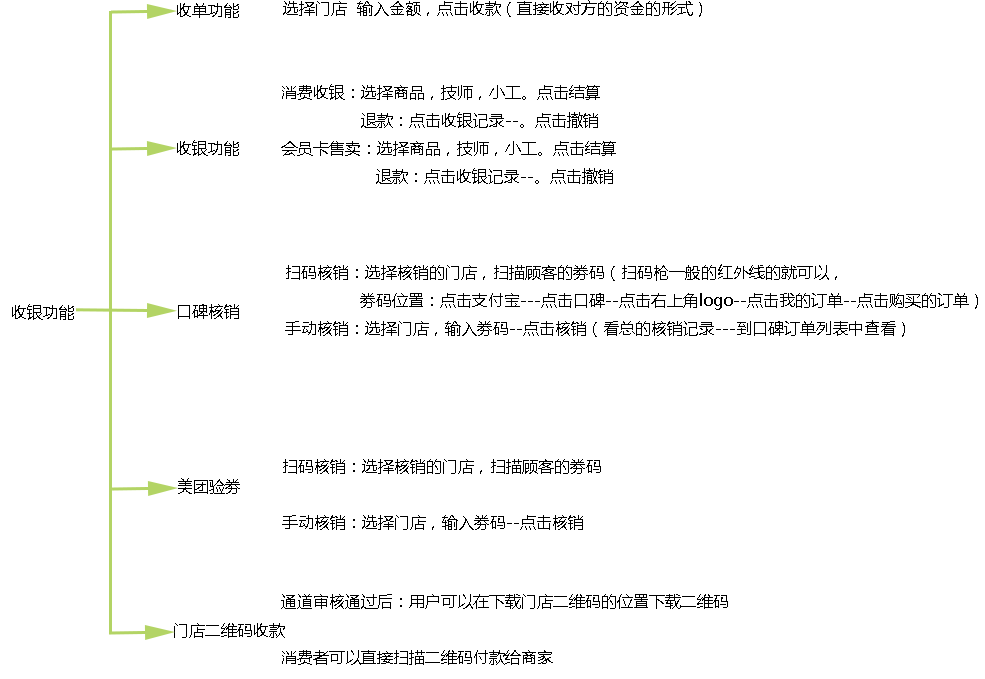
<style>
.page{position:relative;width:985px;height:679px;background:#ffffff}
.page>*{position:absolute;margin:0}
.t1{font:16px "MicrosoftYaHei";color:#000000}
</style>
<div class="page">
<p class="t1" style="left:177px;top:3px;width:62px;height:15px">收单功能</p>
<p class="t1" style="left:283px;top:0px;width:419px;height:17px">选择门店  输入金额，点击收款（直接收对方的资金的形式）</p>
<p class="t1" style="left:281px;top:84px;width:335px;height:100px">消费收银：选择商品，技师，小工。点击结算<br>                退款：点击收银记录--。点击撤销<br>会员卡售卖：选择商品，技师，小工。点击结算<br>                   退款：点击收银记录--。点击撤销</p>
<p class="t1" style="left:177px;top:140px;width:62px;height:16px">收银功能</p>
<p class="t1" style="left:285px;top:264px;width:693px;height:73px">扫码核销：选择核销的门店，扫描顾客的劵码（扫码枪一般的红外线的就可以，<br>               劵码位置：点击支付宝---点击口碑--点击右上角logo--点击我的订单--点击购买的订单）<br>手动核销：选择门店，输入劵码--点击核销（看总的核销记录---到口碑订单列表中查看）</p>
<p class="t1" style="left:12px;top:304px;width:62px;height:16px">收银功能</p>
<p class="t1" style="left:178px;top:304px;width:61px;height:15px">口碑核销</p>
<p class="t1" style="left:282px;top:459px;width:319px;height:71px">扫码核销：选择核销的门店，扫描顾客的劵码<br><br>手动核销：选择门店，输入劵码--点击核销</p>
<p class="t1" style="left:178px;top:478px;width:62px;height:16px">美团验劵</p>
<p class="t1" style="left:281px;top:594px;width:447px;height:71px">通道审核通过后：用户可以在下载门店二维码的位置下载二维码<br><br>消费者可以直接扫描二维码付款给商家</p>
<p class="t1" style="left:174px;top:623px;width:111px;height:15px">门店二维码收款</p>
</div>
